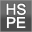
<style>
.page{position:relative;width:32px;height:32px}
.page>*{position:absolute;margin:0}
.t1{font:15px/13.3px "ArialMT";color:#ffffff}
</style>
<div class="page">
<p class="t1" style="left:6px;top:3px;width:20px;height:25px;text-align:center">HS<br>PE</p>
</div>
